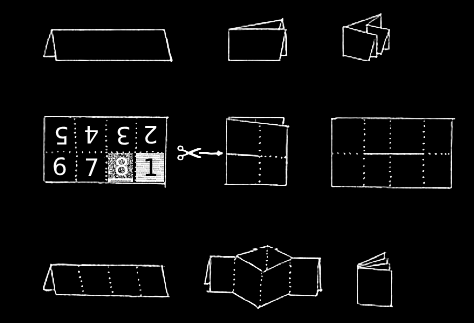
<style>
.page{position:relative;width:474px;height:323px;background:#000000}
.page>*{position:absolute;margin:0}
.t1{font:24px "DejaVuSans";color:#ffffff}
.t2{font:24px "DejaVuSans";color:#000000}
</style>
<div class="page">
<p class="t1" style="left:55px;top:126px;width:13px;height:19px;rotate:-180deg">5</p>
<p class="t1" style="left:55px;top:126px;width:13px;height:19px;rotate:-180deg">5</p>
<p class="t1" style="left:85px;top:126px;width:13px;height:18px;rotate:-180deg">4</p>
<p class="t1" style="left:85px;top:126px;width:13px;height:18px;rotate:-180deg">4</p>
<p class="t1" style="left:117px;top:126px;width:13px;height:19px;rotate:-180deg">3</p>
<p class="t1" style="left:117px;top:126px;width:13px;height:19px;rotate:-180deg">3</p>
<p class="t1" style="left:145px;top:126px;width:12px;height:18px;rotate:-180deg">2</p>
<p class="t1" style="left:145px;top:126px;width:12px;height:18px;rotate:-180deg">2</p>
<p class="t1" style="left:53px;top:157px;width:13px;height:19px">6</p>
<p class="t1" style="left:53px;top:157px;width:13px;height:19px">6</p>
<p class="t1" style="left:85px;top:158px;width:13px;height:18px">7</p>
<p class="t1" style="left:85px;top:158px;width:13px;height:18px">7</p>
<p class="t1" style="left:115px;top:157px;width:13px;height:19px">8</p>
<p class="t1" style="left:115px;top:157px;width:13px;height:19px">8</p>
<p class="t2" style="left:145px;top:158px;width:12px;height:18px">1</p>
<p class="t2" style="left:145px;top:158px;width:12px;height:18px">1</p>
</div>
